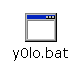
<style>
.page{position:relative;width:80px;height:80px;background:#ffffff}
.page>*{position:absolute;margin:0}
.t1{font:14px "MSReferenceSansSerif";color:#000000}
</style>
<div class="page">
<p class="t1" style="left:13px;top:47px;width:55px;height:14px">y0lo.bat</p>
</div>
